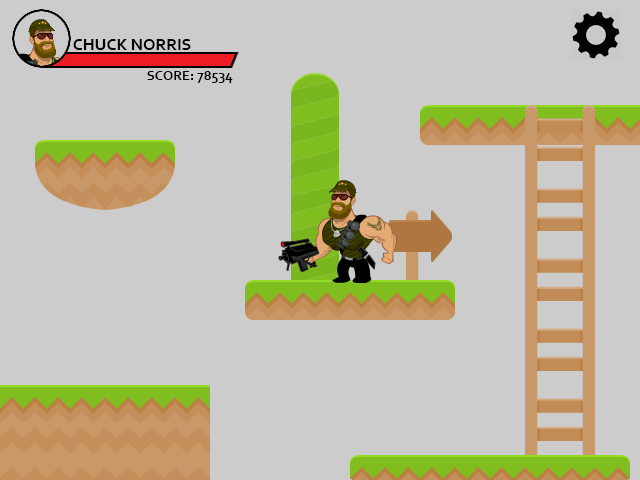
<style>
.page{position:relative;width:640px;height:480px;background:#cccccc}
.page>*{position:absolute;margin:0}
.t1{font:17px "Corbel-Bold";color:#000000}
.t2{font:14px "Corbel-Bold";color:#000000}
</style>
<div class="page">
<p class="t1" style="left:73px;top:39px;width:118px;height:11px">CHUCK NORRIS</p>
<p class="t2" style="left:147px;top:71px;width:86px;height:12px">SCORE: 78534</p>
</div>
